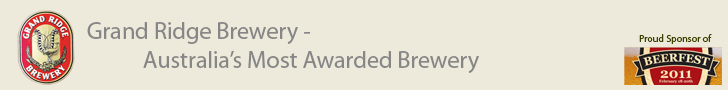
<style>
.page{position:relative;width:728px;height:90px;background:#ede9db}
.page>*{position:absolute;margin:0}
.t1{font:24px "MyriadPro-Regular";color:#868686}
.t2{font:10px "MyriadPro-Regular";color:#3e4000}
</style>
<div class="page">
<p class="t1" style="left:87px;top:22px;width:392px;height:51px">Grand Ridge Brewery -<br>           Australia’s Most Awarded Brewery</p>
<p class="t2" style="left:639px;top:34px;width:73px;height:10px">Proud Sponsor of</p>
</div>
